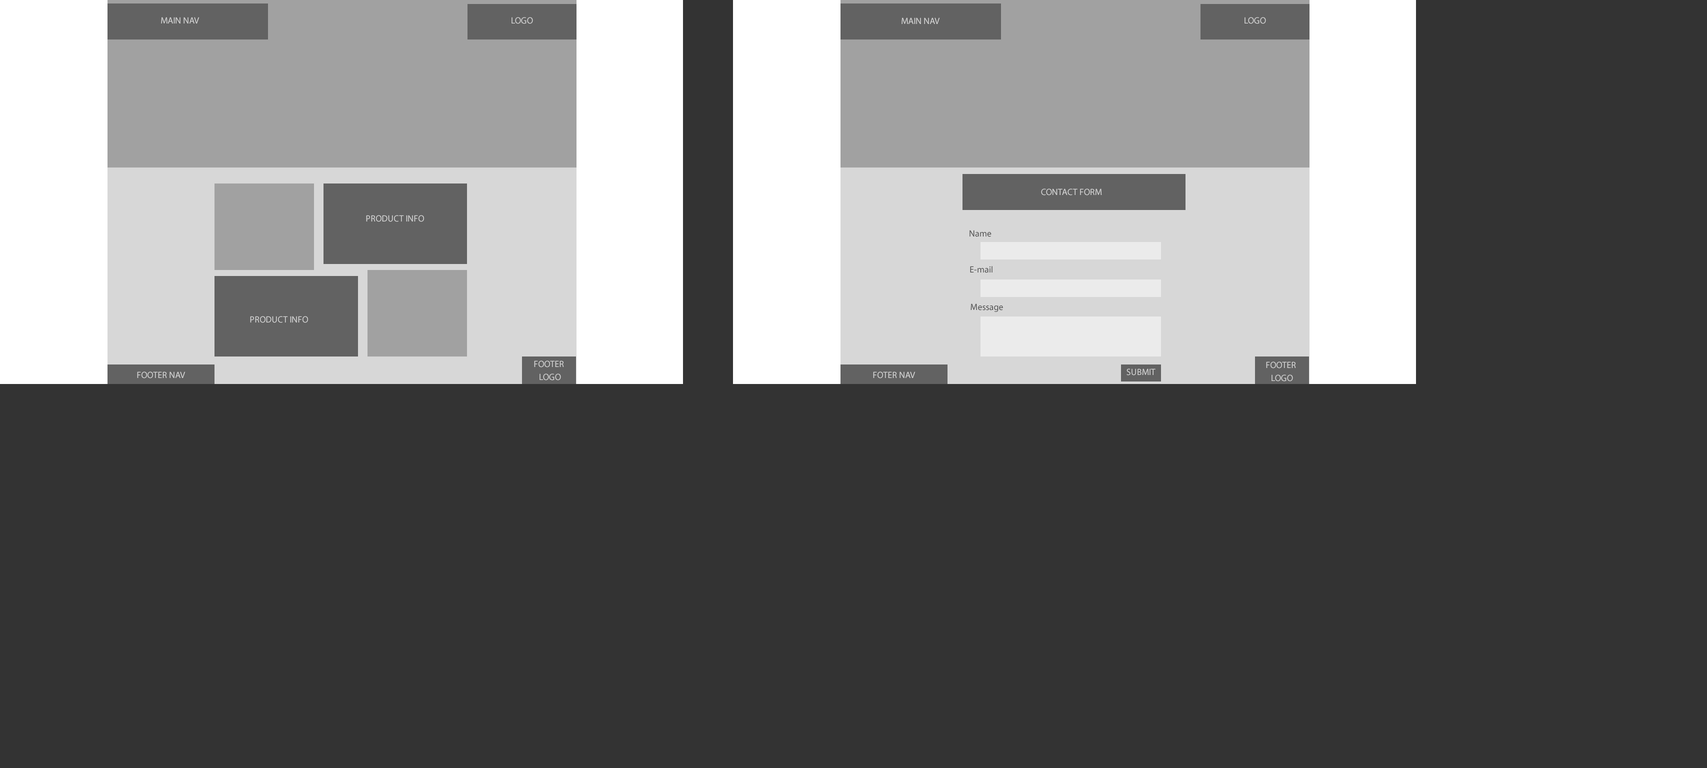
<style>
.page{position:relative;width:1707px;height:768px;background:#333333}
.page>*{position:absolute;margin:0}
.t1{font:9px "MyriadPro-Regular";color:#d7d7d7}
.t2{font:9px "MyriadPro-Regular";color:#494949}
.t3{font:9px/13px "MyriadPro-Regular";color:#d7d7d7}
</style>
<div class="page">
<p class="t1" style="left:161px;top:17px;width:39px;height:7px">MAIN NAV</p>
<p class="t1" style="left:512px;top:17px;width:21px;height:7px">LOGO</p>
<p class="t1" style="left:902px;top:18px;width:38px;height:6px">MAIN NAV</p>
<p class="t1" style="left:1244px;top:17px;width:22px;height:7px">LOGO</p>
<p class="t1" style="left:1041px;top:188px;width:61px;height:8px">CONTACT FORM</p>
<p class="t1" style="left:366px;top:215px;width:58px;height:7px">PRODUCT INFO</p>
<p class="t2" style="left:970px;top:230px;width:22px;height:7px">Name</p>
<p class="t2" style="left:970px;top:266px;width:22px;height:7px">E-mail</p>
<p class="t2" style="left:970px;top:304px;width:33px;height:8px">Message</p>
<p class="t1" style="left:250px;top:316px;width:58px;height:7px">PRODUCT INFO</p>
<p class="t3" style="left:534px;top:360px;width:30px;height:20px;text-align:center">FOOTER <br>LOGO</p>
<p class="t3" style="left:1266px;top:362px;width:30px;height:20px;text-align:center">FOOTER <br>LOGO</p>
<p class="t1" style="left:137px;top:372px;width:49px;height:6px">FOOTER NAV</p>
<p class="t1" style="left:873px;top:372px;width:43px;height:6px">FOTER NAV</p>
<p class="t1" style="left:1126px;top:368px;width:30px;height:8px">SUBMIT</p>
</div>
